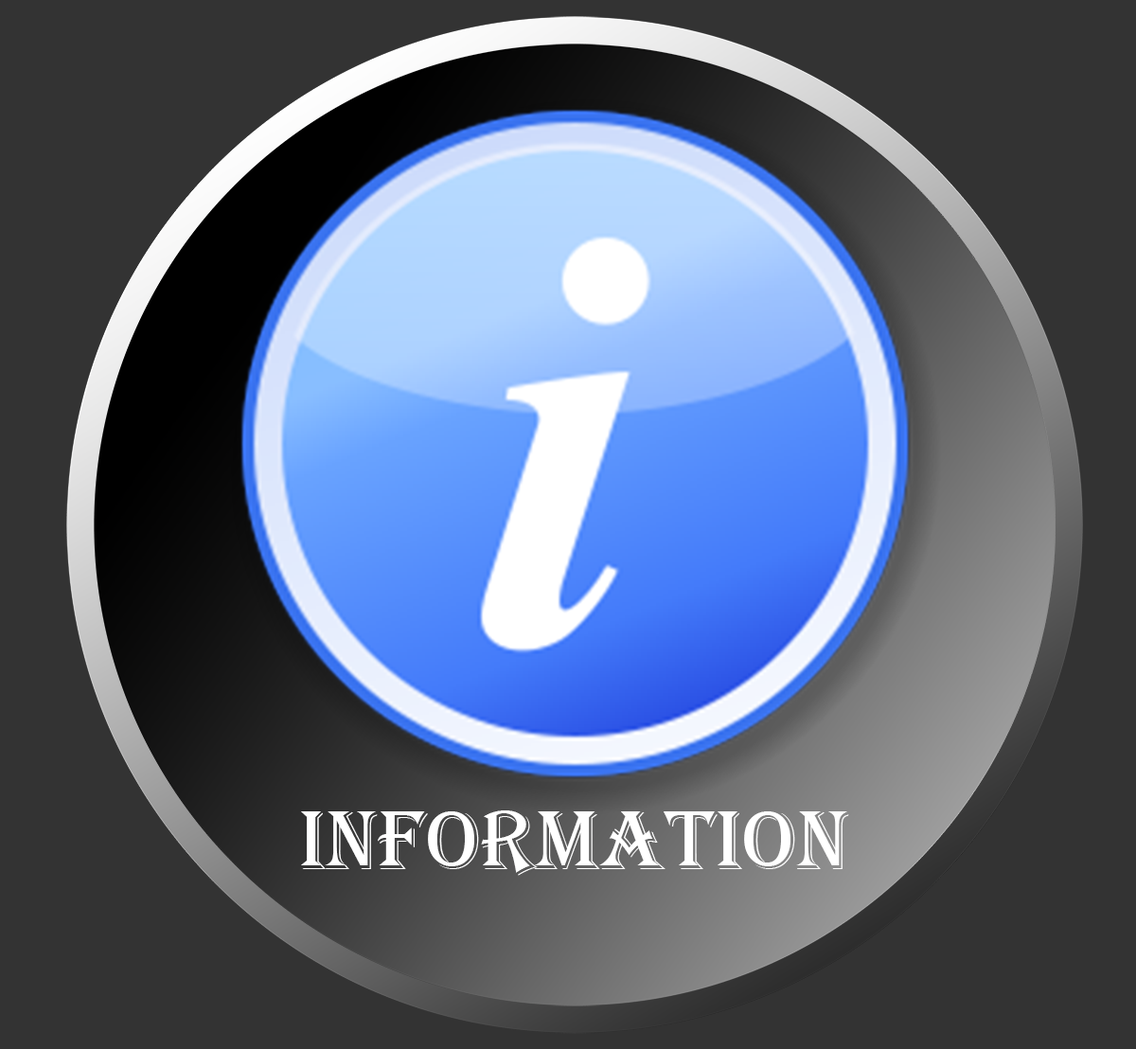
<style>
.page{position:relative;width:1136px;height:1049px;background:#333333}
.page>*{position:absolute;margin:0}
.t1{font:87.1px "Algerian";color:#ffffff}
</style>
<div class="page">
<p class="t1" style="left:301px;top:811px;width:548px;height:65px">information</p>
</div>
